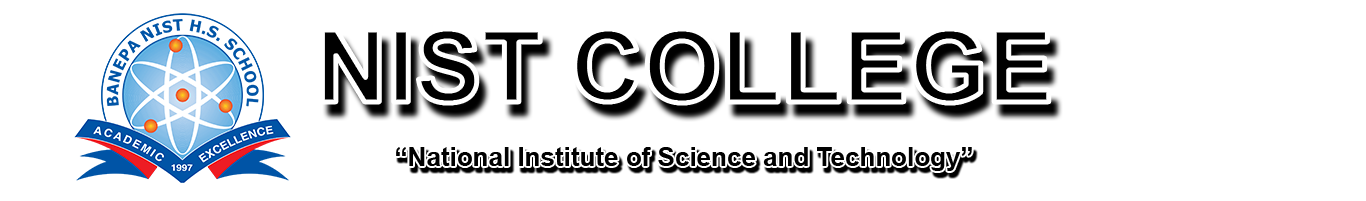
<style>
.page{position:relative;width:1366px;height:201px;background:#ffffff}
.page>*{position:absolute;margin:0}
.t1{font:100px "Arial-BoldMT"}
.t2{font:26px "Arial-BoldMT";color:#010101}
</style>
<div class="page">
<p class="t1" style="left:322px;top:29px;width:727px;height:74px">NIST COLLEGE</p>
<p class="t2" style="left:396px;top:147px;width:576px;height:24px">“National Institute of Science and Technology”</p>
</div>
